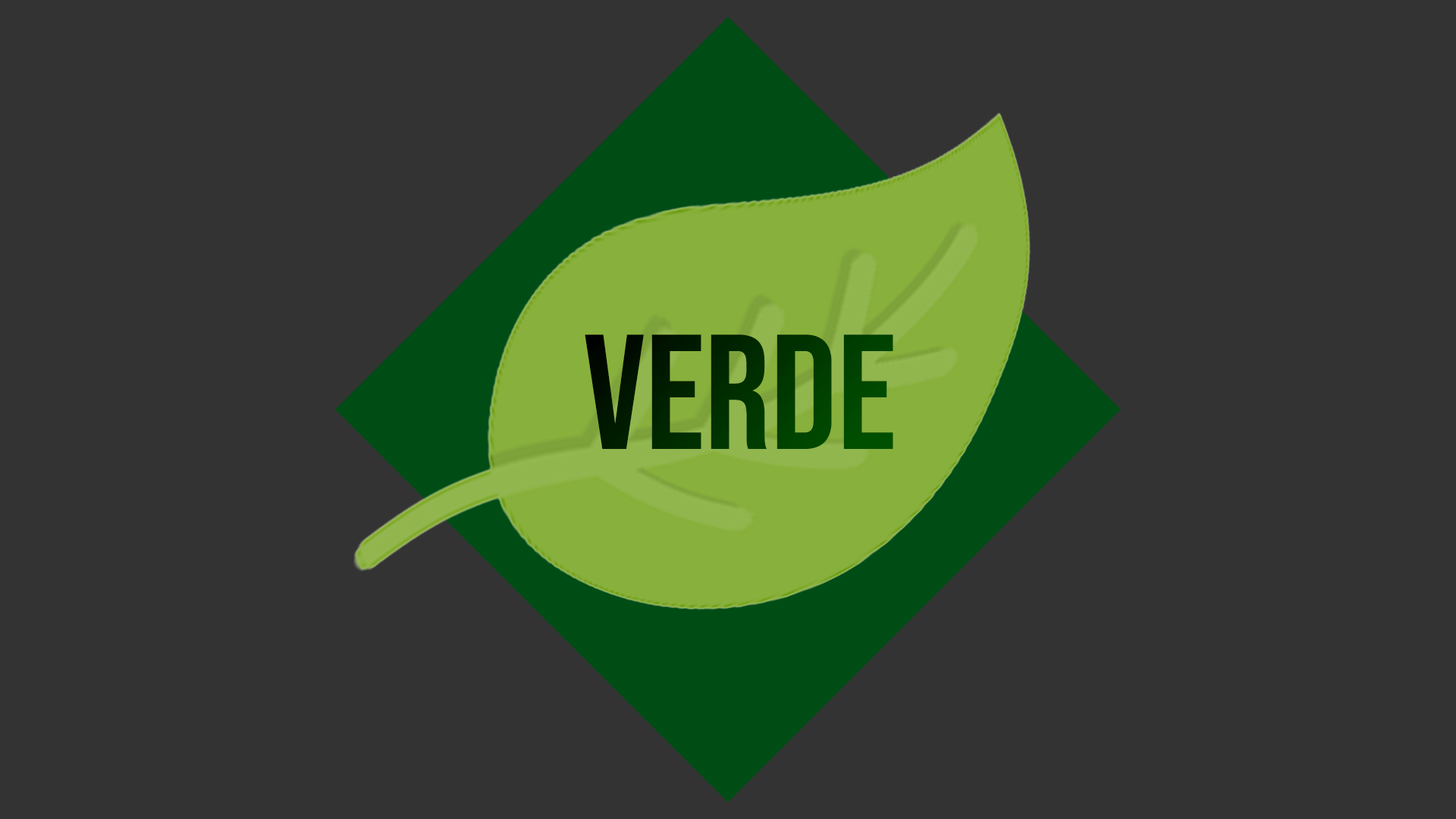
<style>
.page{position:relative;width:1456px;height:819px;background:#333333}
.page>*{position:absolute;margin:0}
.t1{font:163.4px "BebasNeue-Regular"}
</style>
<div class="page">
<p class="t1" style="left:585px;top:334px;width:308px;height:115px">verde</p>
</div>
